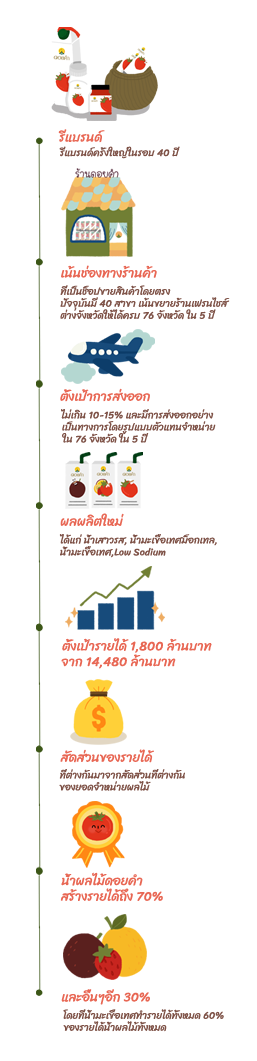
<style>
.page{position:relative;width:257px;height:1061px;background:#ffffff}
.page>*{position:absolute;margin:0}
.t1{font:13px "Sriracha-Regular";color:#e86754}
.t2{font:10px "Sriracha-Regular";color:#7e5247}
</style>
<div class="page">
<p class="t1" style="left:58px;top:129px;width:47px;height:14px">รีแบรนด์</p>
<p class="t2" style="left:59px;top:146px;width:121px;height:13px">รีแบรนด์ครั้งใหญ่ในรอบ 40 ปี</p>
<p class="t1" style="left:61px;top:265px;width:96px;height:13px">เน้นช่องทางร้านค้า</p>
<p class="t2" style="left:60px;top:285px;width:170px;height:35px;text-align:center">ที่เป็นช็อปขายสินค้าโดยตรง                      <br>ปัจจุบันมี 40 สาขา เน้นขยายร้านเฟรนไชส์<br>ต่างจังหวัดให้ได้ครบ 76 จังหวัด ใน 5 ปี</p>
<p class="t1" style="left:60px;top:388px;width:90px;height:14px">ตั้งเป้าการส่งออก</p>
<p class="t2" style="left:61px;top:409px;width:155px;height:34px;text-align:center">ไม่เกิน 10-15% และมีการส่งออกอย่าง <br>เป็นทางการโดยรูปแบบตัวแทนจำหน่าย<br>ใน 76 จังหวัด ใน 5 ปี</p>
<p class="t1" style="left:60px;top:513px;width:64px;height:14px">ผลผลิตใหม่</p>
<p class="t2" style="left:59px;top:534px;width:158px;height:24px;text-align:center">ได้แก่ น้ำเสาวรส, น้ำมะเขือเทศม็อกเทล,<br>น้ำมะเขือเทศ,Low Sodium</p>
<p class="t1" style="left:61px;top:638px;width:151px;height:31px;text-align:center">ตั้งเป้ารายได้ 1,800 ล้านบาท<br>จาก 14,480 ล้านบาท</p>
<p class="t1" style="left:60px;top:749px;width:94px;height:14px">สัดส่วนของรายได้</p>
<p class="t2" style="left:59px;top:769px;width:126px;height:22px;text-align:center">ที่ต่างกันมาจากสัดส่วนที่ต่างกัน<br>ของยอดจำหน่ายผลไม้</p>
<p class="t1" style="left:60px;top:872px;width:103px;height:30px;text-align:center">น้ำผลไม้ดอยคำ      <br>สร้างรายได้ถึง 70%</p>
<p class="t1" style="left:61px;top:989px;width:89px;height:16px">และอื่นๆอีก 30%</p>
<p class="t2" style="left:63px;top:1009px;width:161px;height:23px;text-align:center">โดยที่น้ำมะเขือเทศทำรายได้ทั้งหมด 60%<br>ของรายได้น้ำผลไม้ทั้งหมด</p>
</div>
